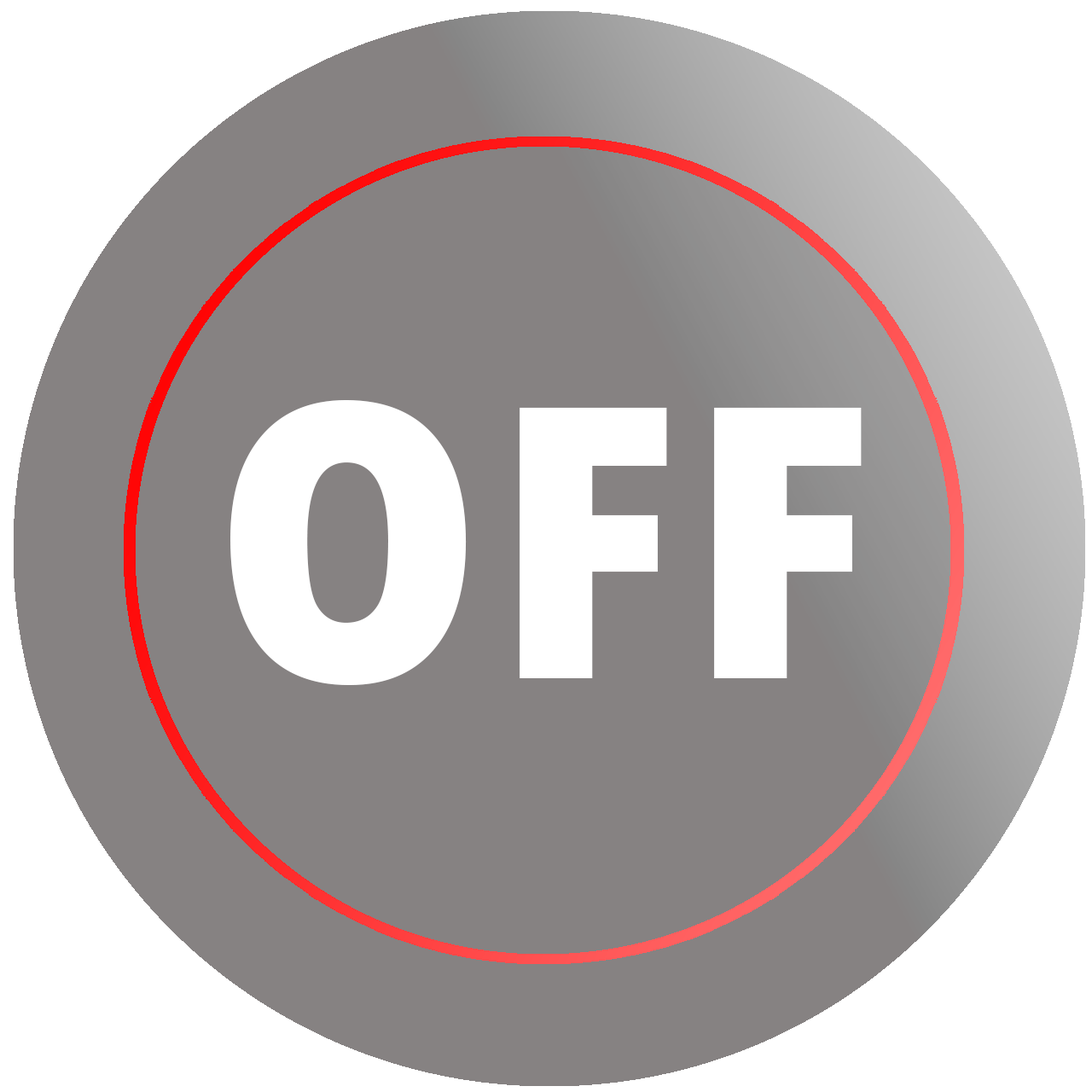
<style>
.page{position:relative;width:1092px;height:1092px;background:#868282}
.page>*{position:absolute;margin:0}
.t1{font:414.7px "TwCenMT-CondensedExtraBold";color:#ffffff;scale:1.18 1}
</style>
<div class="page">
<p class="t1" style="left:230px;top:399px;width:632px;height:286px">OFF</p>
</div>
